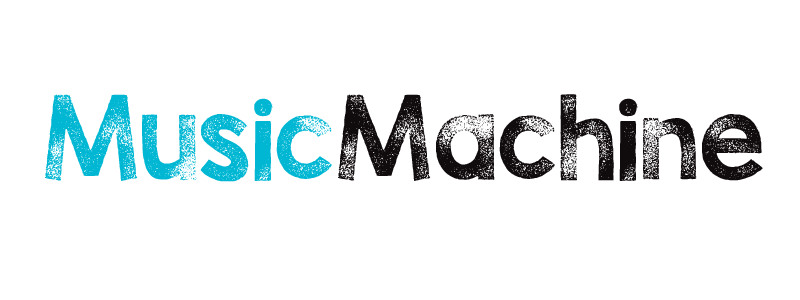
<style>
.page{position:relative;width:800px;height:300px;background:#ffffff}
.page>*{position:absolute;margin:0}
.t1{font:94.2px "KGTRIBECASTAMP";color:#100b0d}
.t2{font:94.2px "KGTRIBECASTAMP";color:#00b7d3}
</style>
<div class="page">
<p class="t1" style="left:45px;top:94px;width:718px;height:88px"><span class="t2">Music</span>Machine</p>
</div>
